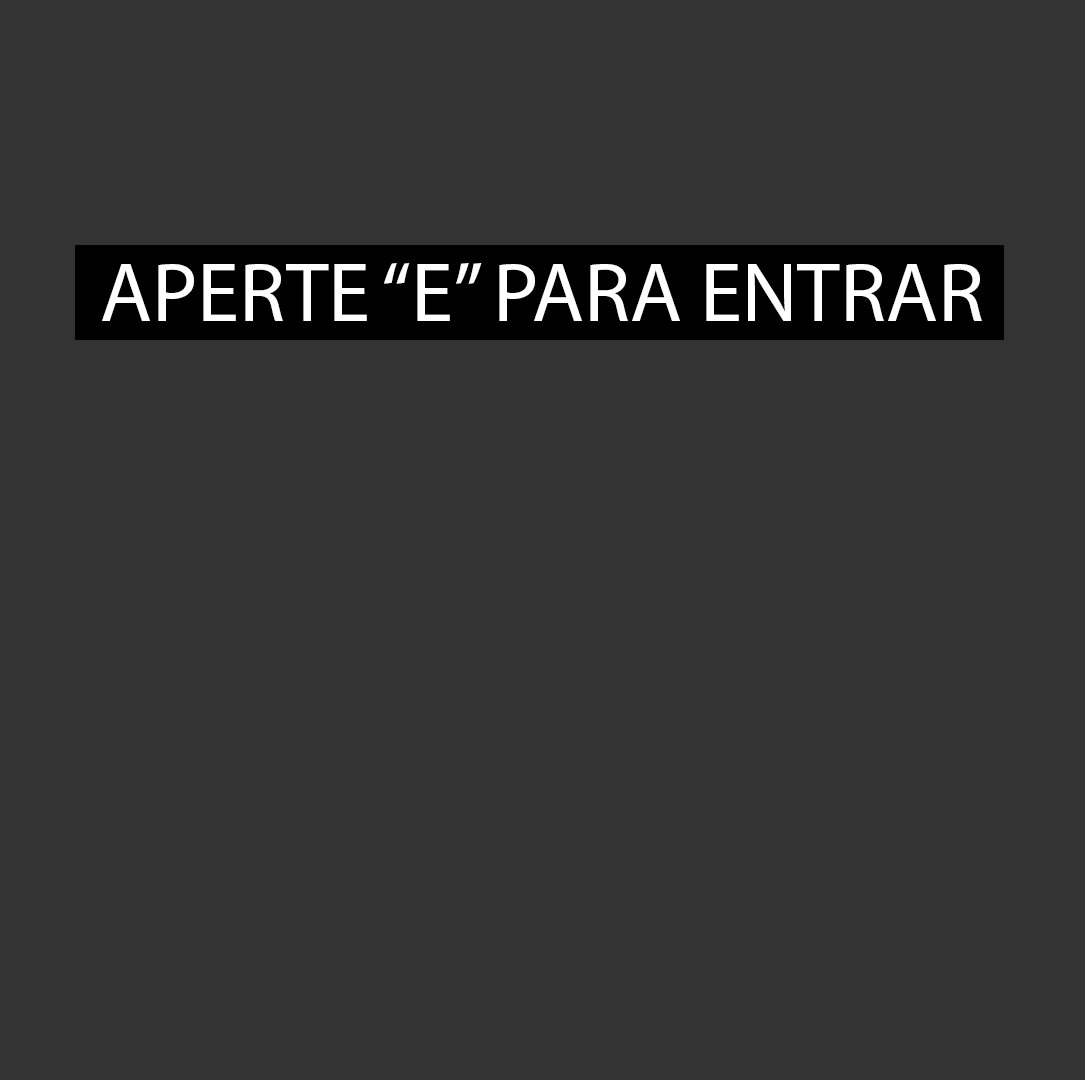
<style>
.page{position:relative;width:1085px;height:1080px;background:#333333}
.page>*{position:absolute;margin:0}
.t1{font:85px "MyriadPro-Regular";color:#ffffff}
</style>
<div class="page">
<p class="t1" style="left:102px;top:263px;width:880px;height:58px">APERTE “E” PARA ENTRAR</p>
</div>
